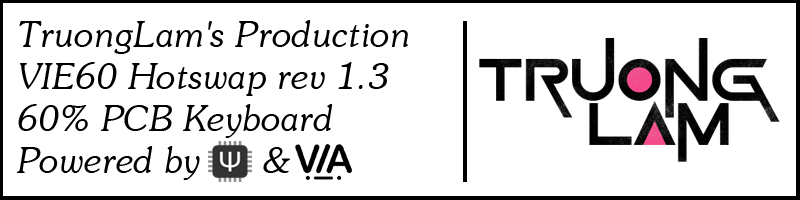
<style>
.page{position:relative;width:800px;height:200px;background:#ffffff}
.page>*{position:absolute;margin:0}
.t1{font:35px "UVNSaigonItalic";color:#000000}
</style>
<div class="page">
<p class="t1" style="left:17px;top:20px;width:391px;height:160px">TruongLam's Production<br>VIE60 Hotswap rev 1.3<br>60% PCB Keyboard<br>Powered by      &amp;</p>
</div>
